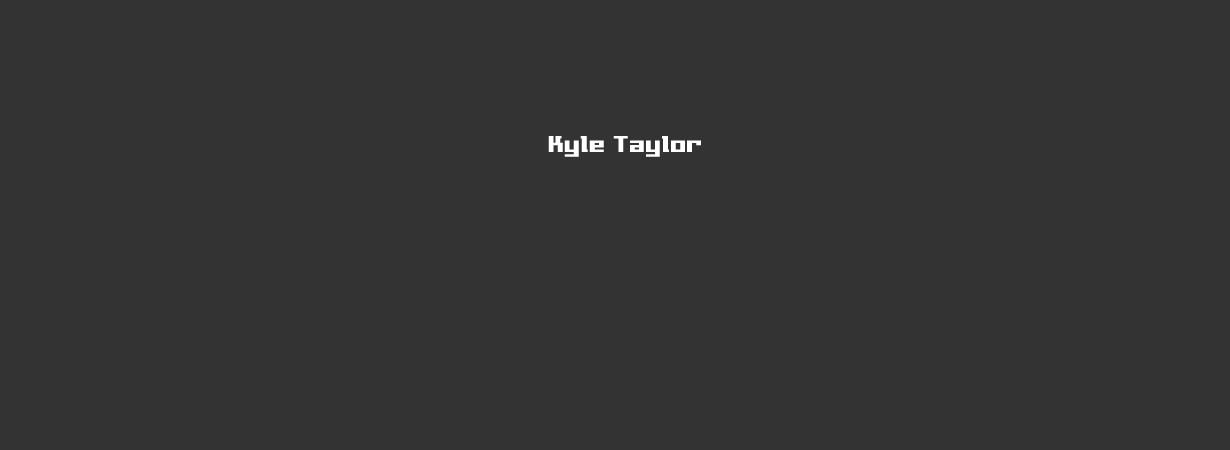
<style>
.page{position:relative;width:1230px;height:450px;background:#333333}
.page>*{position:absolute;margin:0}
.t1{font:29.2px "Millennia";color:#ffffff}
</style>
<div class="page">
<p class="t1" style="left:548px;top:136px;width:153px;height:21px">Kyle Taylor</p>
</div>
